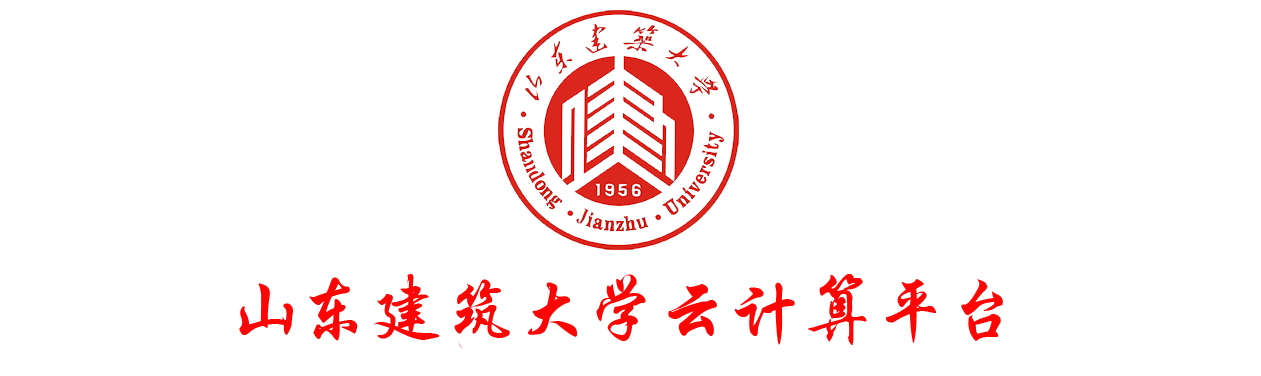
<style>
.page{position:relative;width:1261px;height:376px;background:#ffffff}
.page>*{position:absolute;margin:0}
.t1{font:72px "STXingkai";color:#fb0505}
</style>
<div class="page">
<p class="t1" style="left:239px;top:274px;width:764px;height:71px">山东建筑大学云计算平台</p>
</div>
